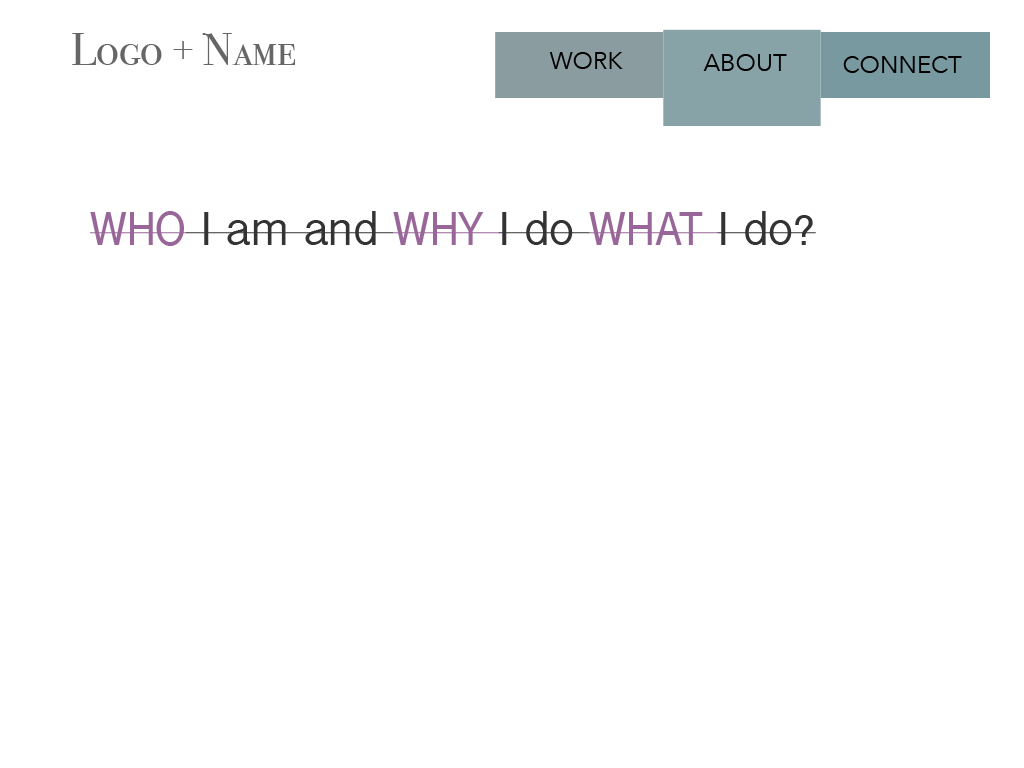
<style>
.page{position:relative;width:1024px;height:768px;background:#ffffff}
.page>*{position:absolute;margin:0}
.t1{font:45px "BodoniSvtyTwoSCITCTTBook";color:#666666}
.t2{font:24px "AvenirNext-Regular";color:#000000}
.t3{font:50px "InaiMathi";color:#333333}
.t4{font:50px "InaiMathi";color:#996699}
</style>
<div class="page">
<p class="t1" style="left:72px;top:33px;width:224px;height:32px">Logo + Name</p>
<p class="t2" style="left:549px;top:52px;width:74px;height:17px">WORK</p>
<p class="t2" style="left:703px;top:54px;width:84px;height:17px">ABOUT</p>
<p class="t2" style="left:843px;top:56px;width:119px;height:17px">CONNECT</p>
<p class="t3" style="left:90px;top:211px;width:726px;height:35px"><span class="t4">WHO</span> I am and <span class="t4">WHY </span>I do <span class="t4">WHAT </span>I do?</p>
</div>
